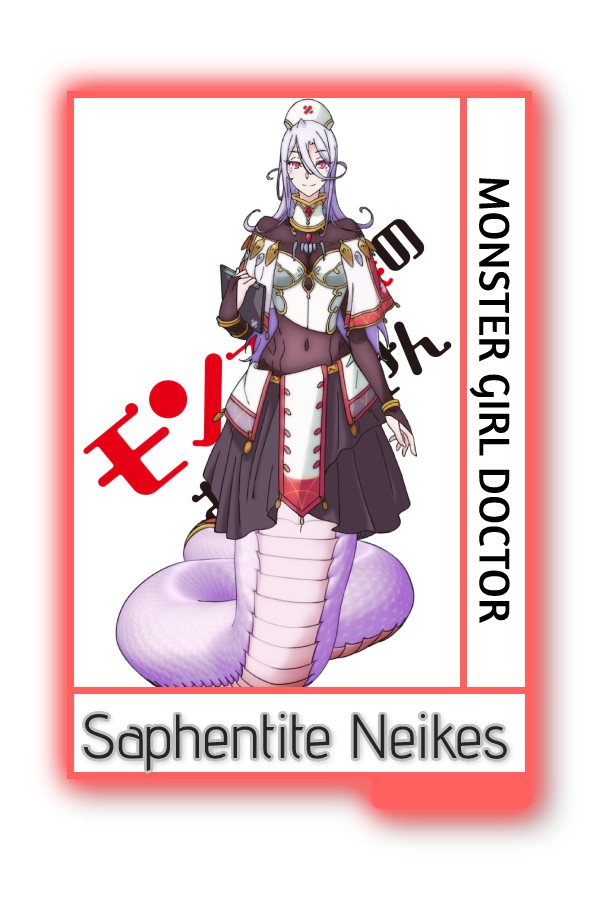
<style>
.page{position:relative;width:600px;height:900px;background:#ffffff}
.page>*{position:absolute;margin:0}
.t1{font:44px "Amaranth-Regular";color:#000000}
.t2{font:62px "AdventPro-Regular";color:#252525}
</style>
<div class="page">
<p class="t1" style="left:469px;top:178px;width:41px;height:446px;rotate:90deg">MONSTER GIRL DOCTOR</p>
<p class="t2" style="left:83px;top:713px;width:424px;height:59px">Saphentite Neikes</p>
</div>
